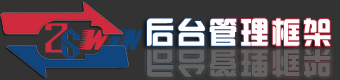
<style>
.page{position:relative;width:340px;height:80px;background:#333333}
.page>*{position:absolute;margin:0}
.t1{font:35.5px "Barbatrick";letter-spacing:0.1em;color:#11457e}
.t2{font:35.5px "Barbatrick";letter-spacing:0.1em;color:#d02a3e}
.t3{font:29.4px "hzgb";letter-spacing:0.1em;color:#fefcfc}
.t4{font:29.4px "hzgb";letter-spacing:0.1em;color:#646363}
</style>
<div class="page">
<p class="t1" style="left:78px;top:29px;width:66px;height:21px"><span class="t2">W</span>IN</p>
<p class="t3" style="left:147px;top:18px;width:184px;height:28px">后台管理框架</p>
<p class="t4" style="left:147px;top:49px;width:184px;height:28px">后台管理框架</p>
</div>
